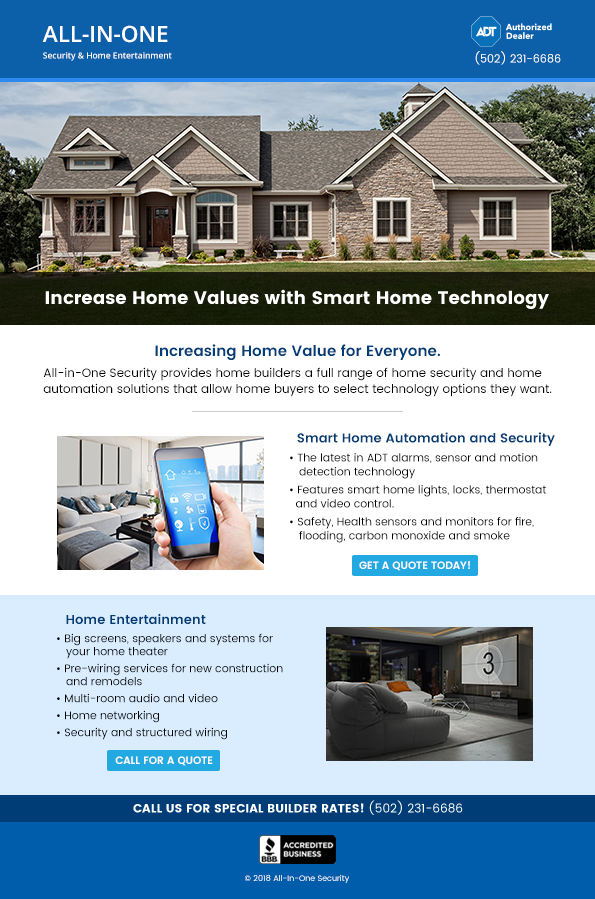
<style>
.page{position:relative;width:595px;height:899px;background:#ffffff}
.page>*{position:absolute;margin:0}
.t1{font:8.4px/14px "OpenSans-Semibold";color:#ffffff}
.t2{font:22.4px/14px "OpenSans-Semibold";color:#ffffff}
.t3{font:11px "Poppins-Regular";color:#ffffff}
.t4{font:18px "Poppins";color:#ffffff}
.t5{font:12px/16px "Poppins-Regular";color:#000000}
.t6{font:15px/14px "Poppins-SemiBold";color:#003c76}
.t7{font:11px/14px "Poppins-Regular";color:#000000}
.t8{font:13px/14px "Poppins-SemiBold";color:#003c76}
.t9{font:10.4px "Poppins-SemiBold";color:#fdfdfe}
.t10{font:13px "Poppins-SemiBold";color:#003c76}
.t11{font:11px/13px "Poppins-Regular";color:#000000}
.t12{font:12px "Poppins";color:#ffffff}
.t13{font:12px "Poppins-Regular";color:#ffffff}
.t14{font:8px "Poppins-Regular";color:#ffffff}
</style>
<div class="page">
<p class="t1" style="left:42px;top:25px;width:130px;height:36px"><span class="t2">ALL-IN-ONE<br></span>Security &amp; Home Entertainment</p>
<p class="t3" style="left:475px;top:51px;width:86px;height:14px">(502) 231-6686</p>
<p class="t4" style="left:45px;top:289px;width:504px;height:20px">Increase Home Values with Smart Home Technology</p>
<p class="t5" style="left:43px;top:344px;width:509px;height:53px;text-align:center"><span class="t6">Increasing Home Value for Everyone.<br></span>All-in-One Security provides home builders a full range of home security and home automation solutions that allow home buyers to select technology options they want.</p>
<p class="t7" style="left:290px;top:432px;width:265px;height:111px"><span class="t8">  Smart Home Automation and Security<br></span>• The latest in ADT alarms, sensor and motion <br>   detection technology<br>• Features smart home lights, locks, thermostat<br>  and video control.<br>• Safety, Health sensors and monitors for fire, <br>   flooding, carbon monoxide and smoke</p>
<p class="t9" style="left:359px;top:561px;width:111px;height:10px">GET A QUOTE TODAY!</p>
<p class="t10" style="left:66px;top:613px;width:140px;height:11px">Home Entertainment</p>
<p class="t11" style="left:57px;top:633px;width:226px;height:107px">• Big screens, speakers and systems for <br>   your home theater<br>• Pre-wiring services for new construction <br>   and remodels<br>• Multi-room audio and video<br>• Home networking<br>• Security and structured wiring</p>
<p class="t9" style="left:115px;top:756px;width:98px;height:10px">CALL FOR A QUOTE</p>
<p class="t12" style="left:133px;top:800px;width:330px;height:15px">CALL US FOR SPECIAL BUILDER RATES!<span class="t13"> (502) 231-6686</span></p>
<p class="t14" style="left:245px;top:874px;width:104px;height:9px">© 2018 All-In-One Security</p>
</div>
